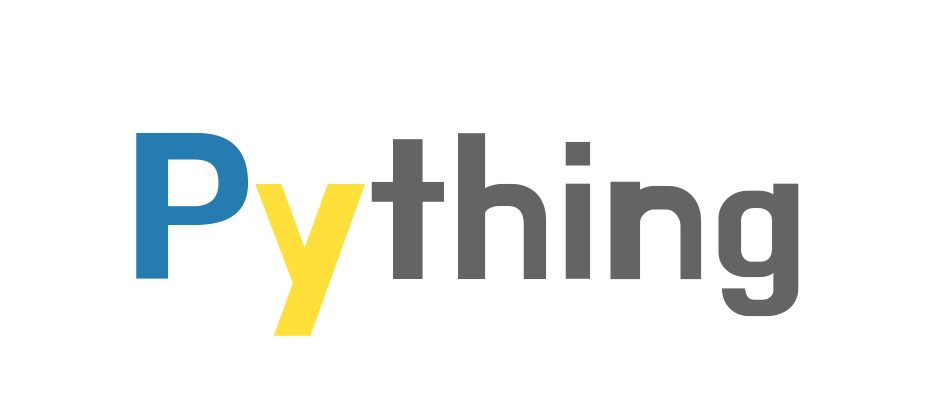
<style>
.page{position:relative;width:930px;height:415px;background:#ffffff}
.page>*{position:absolute;margin:0}
.t1{font:200px "BMHANNA11yrsoldOTF";color:#646464}
.t2{font:200px "BMHANNA11yrsoldOTF";color:#247cb0}
.t3{font:200px "BMHANNA11yrsoldOTF";color:#ffe03b}
</style>
<div class="page">
<p class="t1" style="left:136px;top:132px;width:663px;height:204px"><span class="t2">P</span><span class="t3">y</span>thing</p>
</div>
